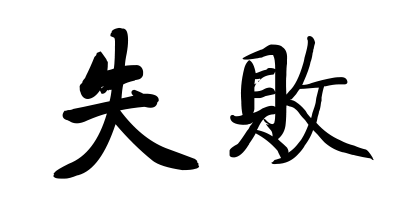
<style>
.page{position:relative;width:400px;height:200px;background:#ffffff}
.page>*{position:absolute;margin:0}
.t1{font:166.7px "FQiTi";color:#000000;font-weight:bold}
</style>
<div class="page">
<p class="t1" style="left:53px;top:27px;width:321px;height:152px">失败</p>
</div>
